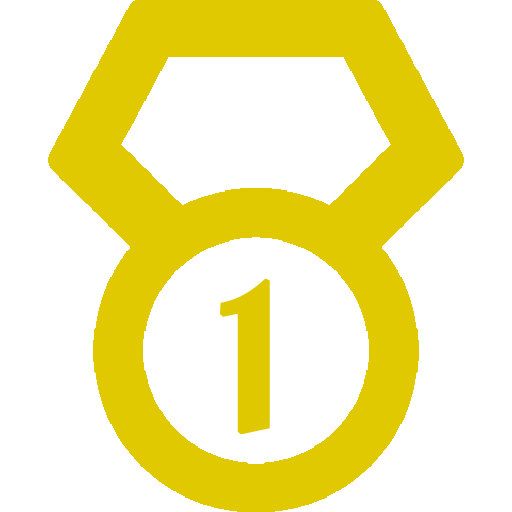
<style>
.page{position:relative;width:512px;height:512px;background:#ffffff}
.page>*{position:absolute;margin:0}
.t1{font:190.2px "Galada-Regular";letter-spacing:0.3em;color:#e0c800;font-weight:bold}
</style>
<div class="page">
<p class="t1" style="left:220px;top:278px;width:50px;height:157px;rotate:-12deg">1</p>
</div>
